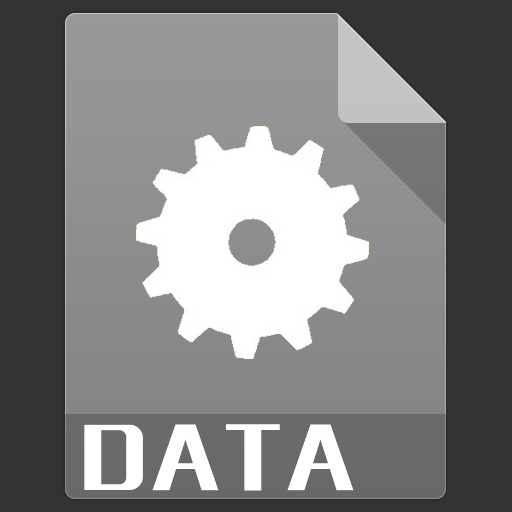
<style>
.page{position:relative;width:512px;height:512px;background:#333333}
.page>*{position:absolute;margin:0}
.t1{font:72px "MFLiHei_Noncommercial-Regular";letter-spacing:0.07em;color:#ffffff}
</style>
<div class="page">
<p class="t1" style="left:84px;top:424px;width:270px;height:67px">DATA</p>
</div>
